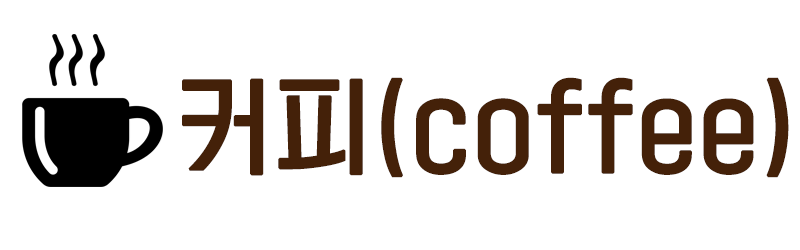
<style>
.page{position:relative;width:800px;height:250px;background:#ffffff}
.page>*{position:absolute;margin:0}
.t1{font:100px "KoreanYNSJG3-R";color:#442109;font-weight:bold}
</style>
<div class="page">
<p class="t1" style="left:182px;top:77px;width:607px;height:101px">커피(coffee)</p>
</div>
